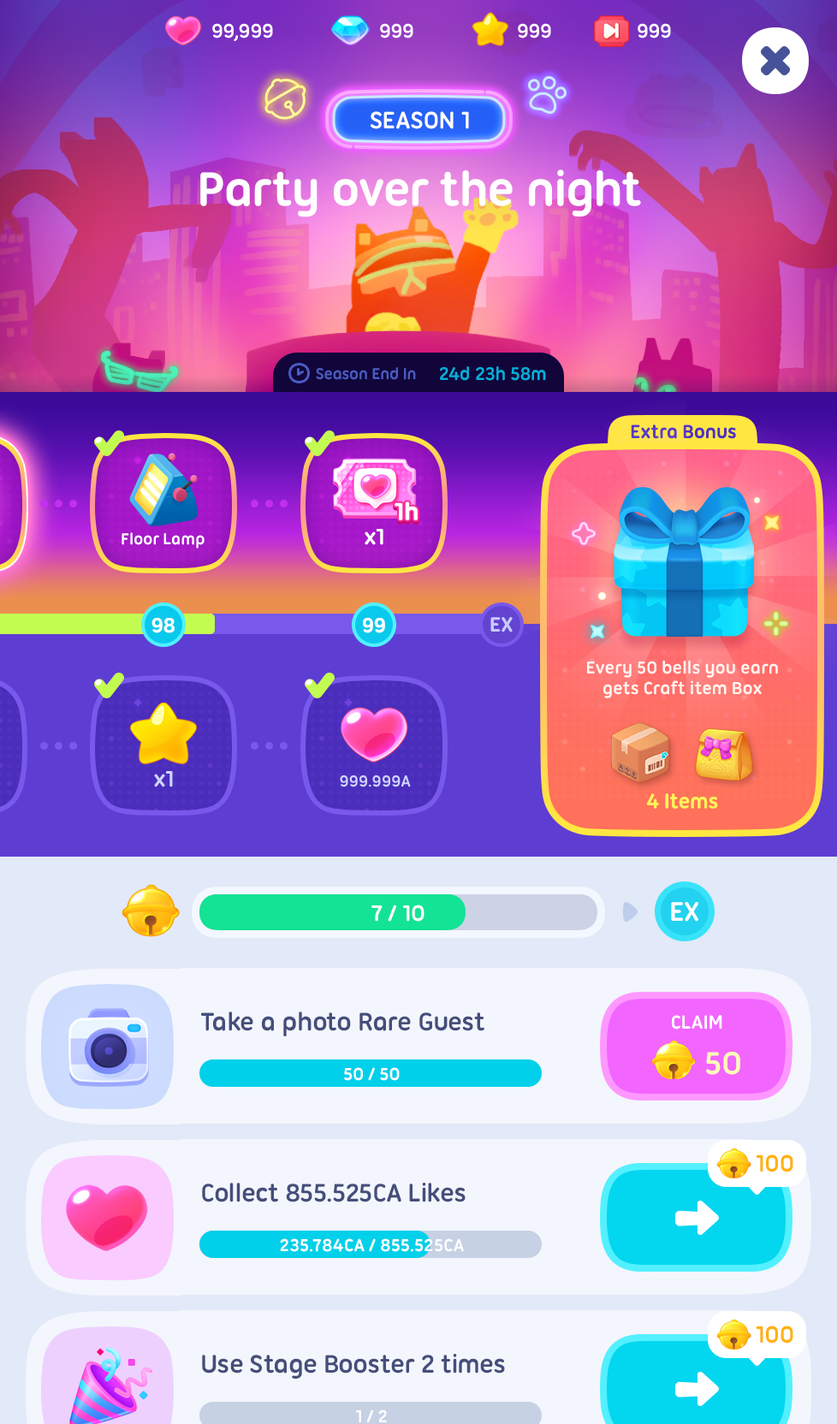
<style>
.page{position:relative;width:837px;height:1424px}
.page>*{position:absolute;margin:0}
.t1{font:25.7px "UbuntuTitling-Bold";letter-spacing:-0.025em;color:#ffffff;text-transform:uppercase}
.t2{font:51.4px "UbuntuTitling-Bold";letter-spacing:-0.025em;color:#ffffff}
.t3{font:17.1px "UbuntuTitling-Bold";letter-spacing:-0.025em;color:#4a5bc2}
.t4{font:19.7px "UbuntuTitling-Bold";letter-spacing:-0.025em;color:#07acdb}
.t5{font:20.5px "UbuntuTitling-Bold";letter-spacing:-0.025em;color:#5031c0}
.t6{font:25.7px "UbuntuTitling-Bold";letter-spacing:-0.025em;color:#ffffff;font-weight:bold}
.t7{font:17.1px "UbuntuTitling-Bold";letter-spacing:-0.025em;color:#ffffff}
.t8{font:24px "UbuntuTitling-Bold";letter-spacing:-0.025em;color:#ffffff}
.t9{font:22.3px "UbuntuTitling-Bold";letter-spacing:-0.025em;color:#c9caff;text-transform:uppercase}
.t10{font:22.3px "UbuntuTitling-Bold";letter-spacing:-0.025em;color:#ffffff;text-transform:uppercase}
.t11{font:18.8px/20.4px "UbuntuTitling-Bold";letter-spacing:-0.025em;color:#fff5f0}
.t12{font:24px "UbuntuTitling-Bold";letter-spacing:-0.025em;color:#ced5ff}
.t13{font:17.1px "UbuntuTitling-Bold";letter-spacing:-0.025em;color:#ced5ff}
.t14{font:22.3px "UbuntuTitling-Bold";letter-spacing:-0.025em;color:#fff458}
.t15{font:29.1px "UbuntuTitling-Bold";letter-spacing:-0.025em;color:#ffffff;text-transform:uppercase}
.t16{font:27.4px "UbuntuTitling-Bold";letter-spacing:-0.025em;color:#454e7b}
.t17{font:20.5px "UbuntuTitling-Bold";letter-spacing:-0.025em;color:#ffffff;text-transform:uppercase}
.t18{font:34.2px "UbuntuTitling-Bold";letter-spacing:-0.025em;color:#fefbb7}
.t19{font:18.8px "UbuntuTitling-Bold";letter-spacing:-0.025em;color:#ffffff}
.t20{font:25.7px "UbuntuTitling-Bold";letter-spacing:-0.025em;color:#ffb10e}
</style>
<div class="page">
<p class="t1" style="left:371px;top:111px;width:98px;height:18px">Season 1</p>
<p class="t2" style="left:200px;top:169px;width:441px;height:48px">Party over the night</p>
<p class="t3" style="left:316px;top:367px;width:100px;height:13px">Season End In</p>
<p class="t4" style="left:440px;top:366px;width:106px;height:15px">24d 23h 58m</p>
<p class="t5" style="left:631px;top:425px;width:105px;height:14px">Extra Bonus</p>
<p class="t6" style="left:395px;top:502px;width:23px;height:18px">1h</p>
<p class="t7" style="left:122px;top:532px;width:83px;height:17px">Floor Lamp</p>
<p class="t8" style="left:365px;top:529px;width:18px;height:16px">x1</p>
<p class="t9" style="left:490px;top:617px;width:23px;height:16px">ex</p>
<p class="t10" style="left:152px;top:618px;width:23px;height:15px">98</p>
<p class="t10" style="left:363px;top:618px;width:22px;height:15px">99</p>
<p class="t11" style="left:587px;top:661px;width:191px;height:37px;text-align:center">Every 50 bells you earn<br>gets Craft item Box</p>
<p class="t12" style="left:154px;top:771px;width:19px;height:17px">x1</p>
<p class="t13" style="left:340px;top:776px;width:71px;height:12px">999.999A</p>
<p class="t14" style="left:646px;top:794px;width:72px;height:15px">4 Items</p>
<p class="t8" style="left:372px;top:905px;width:53px;height:17px">7 / 10</p>
<p class="t15" style="left:671px;top:902px;width:27px;height:20px">ex</p>
<p class="t16" style="left:201px;top:1012px;width:283px;height:25px">Take a photo Rare Guest</p>
<p class="t17" style="left:672px;top:1015px;width:50px;height:15px">Claim</p>
<p class="t18" style="left:706px;top:1052px;width:34px;height:23px">50</p>
<p class="t19" style="left:344px;top:1067px;width:56px;height:14px">50 / 50</p>
<p class="t20" style="left:756px;top:1155px;width:38px;height:18px">100</p>
<p class="t16" style="left:202px;top:1183px;width:264px;height:20px">Collect 855.525CA Likes</p>
<p class="t19" style="left:280px;top:1239px;width:184px;height:13px">235.784CA / 855.525CA</p>
<p class="t20" style="left:756px;top:1326px;width:38px;height:18px">100</p>
<p class="t16" style="left:202px;top:1354px;width:303px;height:25px">Use Stage Booster 2 times</p>
<p class="t19" style="left:356px;top:1410px;width:31px;height:14px">1 / 2</p>
</div>
